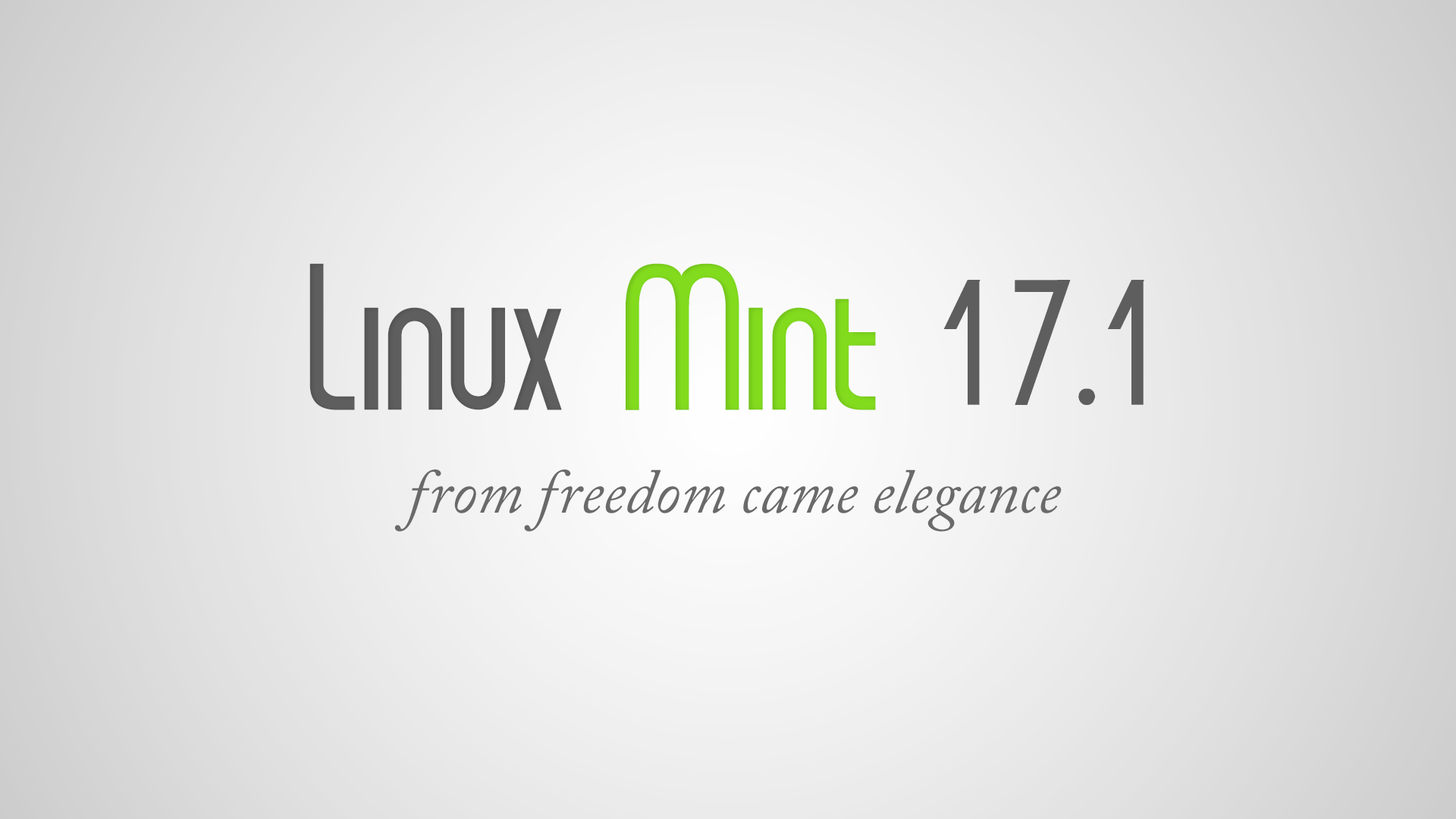
<style>
.page{position:relative;width:1456px;height:819px}
.page>*{position:absolute;margin:0}
.t1{font:221.2px "formintElegance";color:#5e5e5e}
.t2{font:221.2px "formintElegance";color:#82db1d}
.t3{font:189.6px "formintElegance";color:#5e5e5e}
.t4{font:63.2px "ACaslonPro-Italic";color:#6a6a6a}
</style>
<div class="page">
<p class="t1" style="left:309px;top:263px;width:567px;height:147px">Linux <span class="t2">Mint</span></p>
<p class="t3" style="left:943px;top:280px;width:201px;height:125px">17.1</p>
<p class="t4" style="left:394px;top:469px;width:668px;height:63px">from freedom came elegance</p>
</div>
